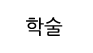
<style>
.page{position:relative;width:93px;height:53px;background:#ffffff}
.page>*{position:absolute;margin:0}
.t1{font:19.9px "NanumGothic";color:#000000}
</style>
<div class="page">
<p class="t1" style="left:26px;top:17px;width:37px;height:19px">학술</p>
</div>
